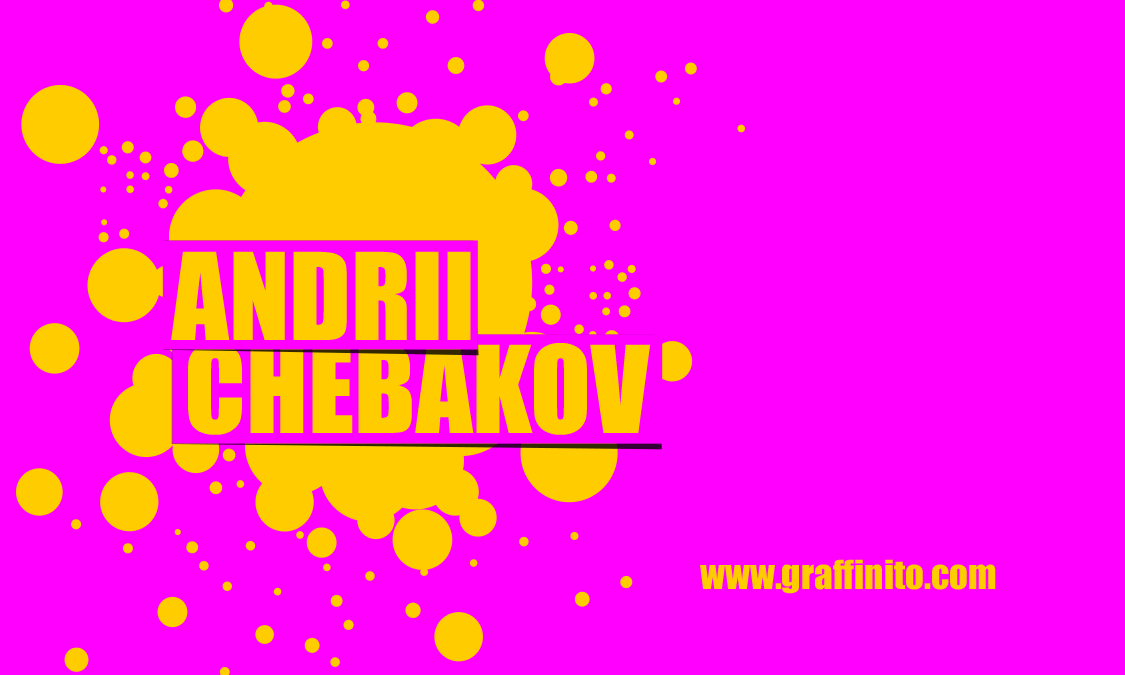
<style>
.page{position:relative;width:1125px;height:675px;background:#ff00ff}
.page>*{position:absolute;margin:0}
.t1{font:111.5px "Impact";color:#ffcc00;text-transform:uppercase}
.t2{font:37.1px "Impact";color:#ffcc00}
</style>
<div class="page">
<p class="t1" style="left:171px;top:251px;width:300px;height:89px">andrii</p>
<p class="t1" style="left:188px;top:343px;width:462px;height:92px">chebakov</p>
<p class="t2" style="left:700px;top:559px;width:296px;height:35px">www.graffinito.com</p>
</div>
